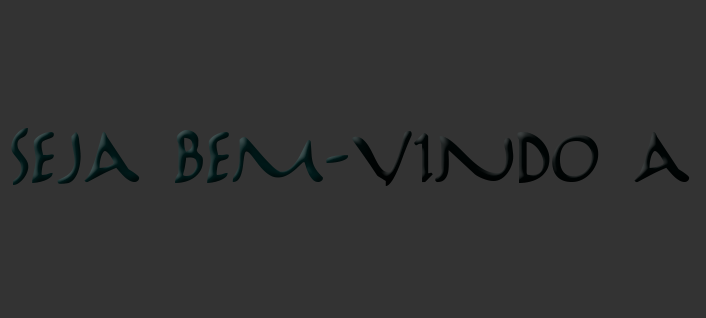
<style>
.page{position:relative;width:706px;height:318px;background:#333333}
.page>*{position:absolute;margin:0}
.t1{font:120.8px "Marathon";color:#001212}
</style>
<div class="page">
<p class="t1" style="left:11px;top:128px;width:679px;height:58px">seja bem-vindo a</p>
</div>
